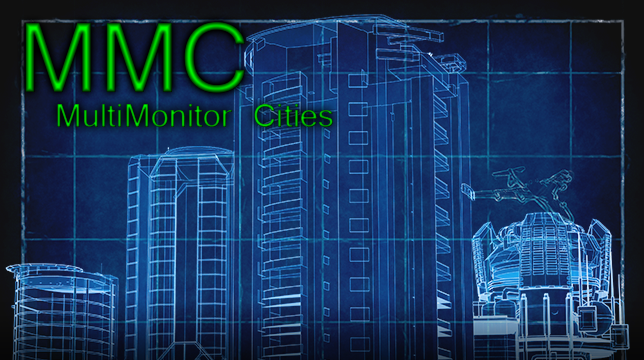
<style>
.page{position:relative;width:644px;height:360px}
.page>*{position:absolute;margin:0}
.t1{font:108px "Vrinda"}
.t2{font:36px "Vrinda"}
</style>
<div class="page">
<p class="t1" style="left:25px;top:22px;width:220px;height:71px">MMC</p>
<p class="t2" style="left:57px;top:104px;width:276px;height:23px">MultiMonitor Cities</p>
</div>
